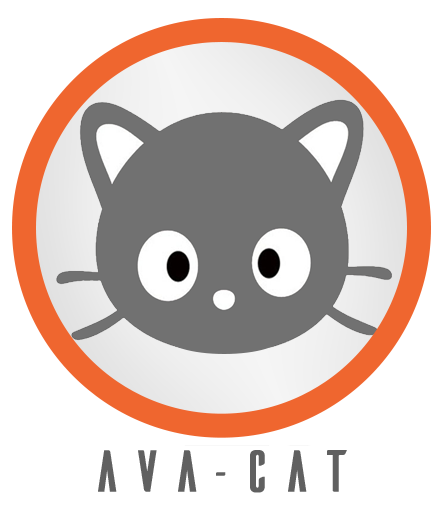
<style>
.page{position:relative;width:444px;height:512px;background:#ffffff}
.page>*{position:absolute;margin:0}
.t1{font:100px "Ailerons-Regular";letter-spacing:0.08em;color:#606060;font-weight:bold}
</style>
<div class="page">
<p class="t1" style="left:98px;top:450px;width:249px;height:43px">AVA-CAT</p>
</div>
